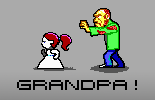
<style>
.page{position:relative;width:155px;height:100px;background:#aaaaaa}
.page>*{position:absolute;margin:0}
.t1{font:10px "Birdy";color:#000000}
</style>
<div class="page">
<p class="t1" style="left:17px;top:80px;width:120px;height:10px">grandpa !</p>
</div>
